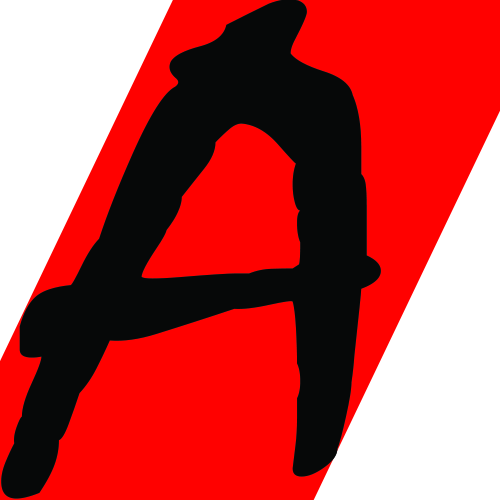
<style>
.page{position:relative;width:500px;height:500px;background:#ff0100}
.page>*{position:absolute;margin:0}
.t1{font:812.7px "Mistral";color:#060808;scale:1.34 1}
</style>
<div class="page">
<p class="t1" style="left:1px;top:0px;width:380px;height:499px">A</p>
</div>
